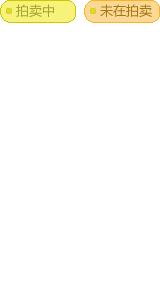
<style>
.page{position:relative;width:160px;height:300px;background:#ffffff}
.page>*{position:absolute;margin:0}
.t1{font:13px "MicrosoftYaHei";color:#a5a236;text-transform:uppercase}
.t2{font:13px "MicrosoftYaHei";color:#a57816;text-transform:uppercase}
</style>
<div class="page">
<p class="t1" style="left:16px;top:4px;width:38px;height:13px">拍卖中</p>
<p class="t2" style="left:100px;top:4px;width:52px;height:13px">未在拍卖</p>
</div>
